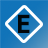
<style>
.page{position:relative;width:48px;height:48px}
.page>*{position:absolute;margin:0}
.t1{font:24.8px "BitstreamVeraSansMono-Bold";color:#010508}
</style>
<div class="page">
<p class="t1" style="left:18px;top:14px;width:12px;height:19px">E</p>
</div>
